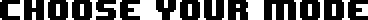
<style>
.page{position:relative;width:368px;height:20px;background:#000000}
.page>*{position:absolute;margin:0}
.t1{font:24px "8BITWONDERNominal";color:#000000}
</style>
<div class="page">
<p class="t1" style="left:0px;top:0px;width:368px;height:20px">Choose your mode</p>
</div>
